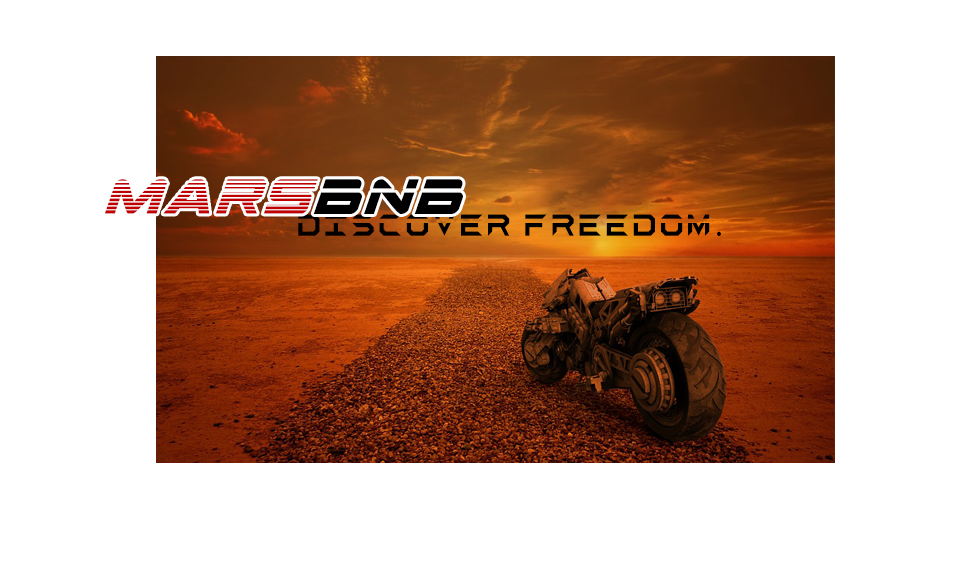
<style>
.page{position:relative;width:960px;height:576px;background:#ffffff}
.page>*{position:absolute;margin:0}
.t1{font:68.9px "SpaceRangerGradientItalic";letter-spacing:0.05em;color:#c00000}
.t2{font:68.9px "SpaceRangerLaserItalic";letter-spacing:0.05em;color:#000000}
.t3{font:33.9px "Aerospace";letter-spacing:0.05em;color:#000000}
.t4{font:33.9px "MyriadPro-Regular";letter-spacing:0.05em;color:#000000}
</style>
<div class="page">
<p class="t1" style="left:105px;top:179px;width:358px;height:35px">Mars<span class="t2">BNB</span></p>
<p class="t3" style="left:298px;top:214px;width:423px;height:22px">discover freedom<span class="t4">.</span></p>
</div>
